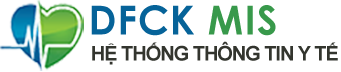
<style>
.page{position:relative;width:341px;height:72px;background:#ffffff}
.page>*{position:absolute;margin:0}
.t1{font:39.9px "CenturyGothic-Bold";letter-spacing:0.025em;color:#066399}
.t2{font:39.9px "CenturyGothic-Bold";letter-spacing:0.025em;color:#38994b}
.t3{font:19.9px "Arial-BoldMT";letter-spacing:-0.05em;color:#33352e}
</style>
<div class="page">
<p class="t1" style="left:91px;top:5px;width:185px;height:31px">DFCK <span class="t2">MIS</span></p>
<p class="t3" style="left:92px;top:41px;width:246px;height:24px">HỆ THỐNG THÔNG TIN Y TẾ</p>
</div>
